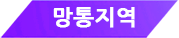
<style>
.page{position:relative;width:179px;height:38px;background:#ffffff}
.page>*{position:absolute;margin:0}
.t1{font:22px "NanumGothicBold";color:#ffffff;font-weight:bold}
</style>
<div class="page">
<p class="t1" style="left:53px;top:7px;width:82px;height:21px">망통지역</p>
</div>
